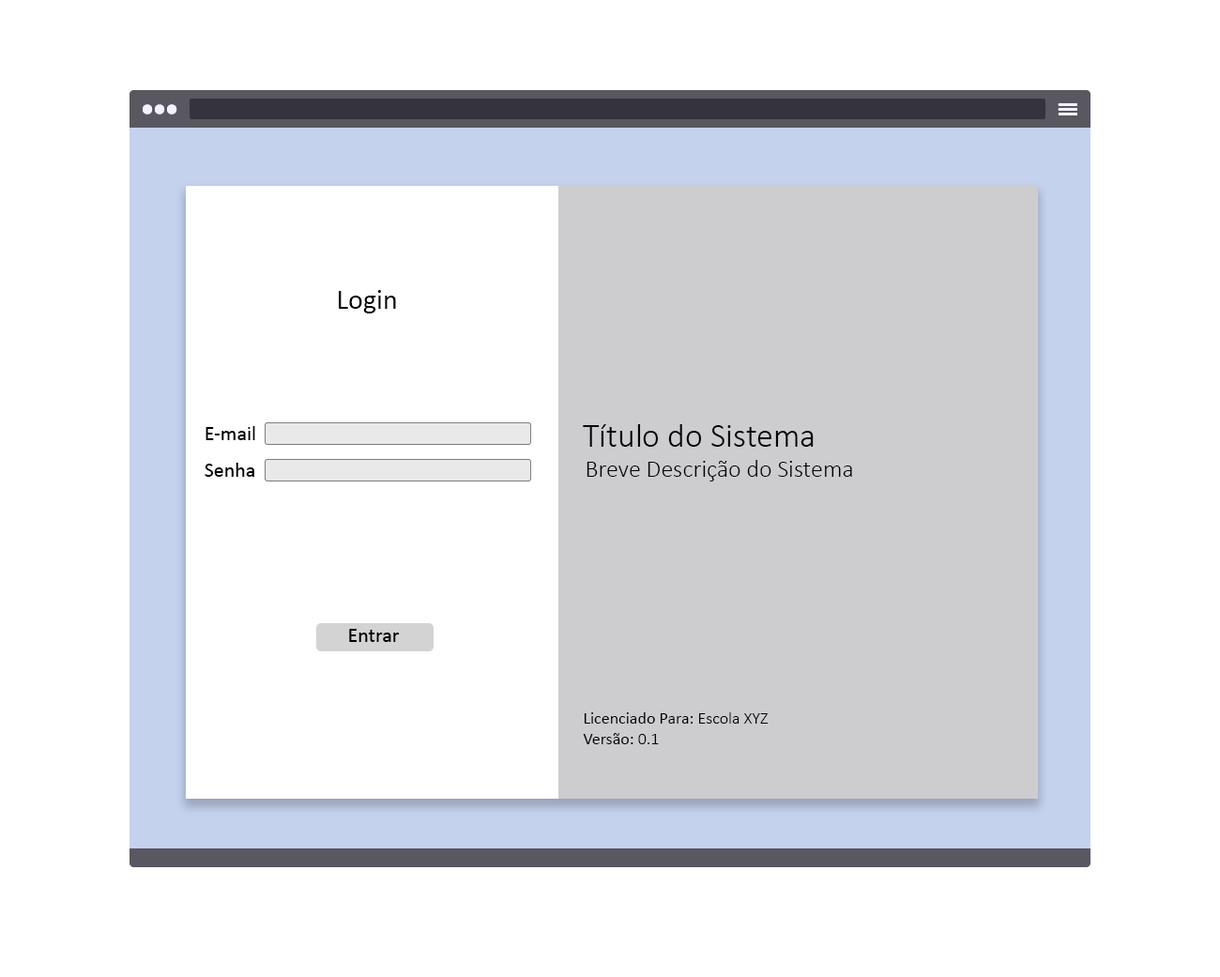
<style>
.page{position:relative;width:1220px;height:977px;background:#ffffff}
.page>*{position:absolute;margin:0}
.t1{font:28.2px "Calibri";color:#000000}
.t2{font:33.8px "Calibri-Light";color:#000000}
.t3{font:20.7px "Calibri";color:#000000}
.t4{font:24.4px "Calibri-Light";color:#000000}
.t5{font:16.9px "Calibri";color:#000000}
.t6{font:16.9px "Calibri-Light";color:#000000}
</style>
<div class="page">
<p class="t1" style="left:339px;top:290px;width:57px;height:24px">Login</p>
<p class="t2" style="left:583px;top:424px;width:231px;height:23px">Título do Sistema</p>
<p class="t3" style="left:206px;top:426px;width:49px;height:14px">E-mail</p>
<p class="t4" style="left:587px;top:460px;width:265px;height:22px">Breve Descrição do Sistema</p>
<p class="t3" style="left:205px;top:463px;width:49px;height:14px">Senha</p>
<p class="t3" style="left:349px;top:629px;width:51px;height:13px">Entrar</p>
<p class="t5" style="left:583px;top:712px;width:185px;height:32px">Licenciado Para:<span class="t6"> Escola XYZ<br></span>Versão: <span class="t6">0.1</span></p>
</div>
